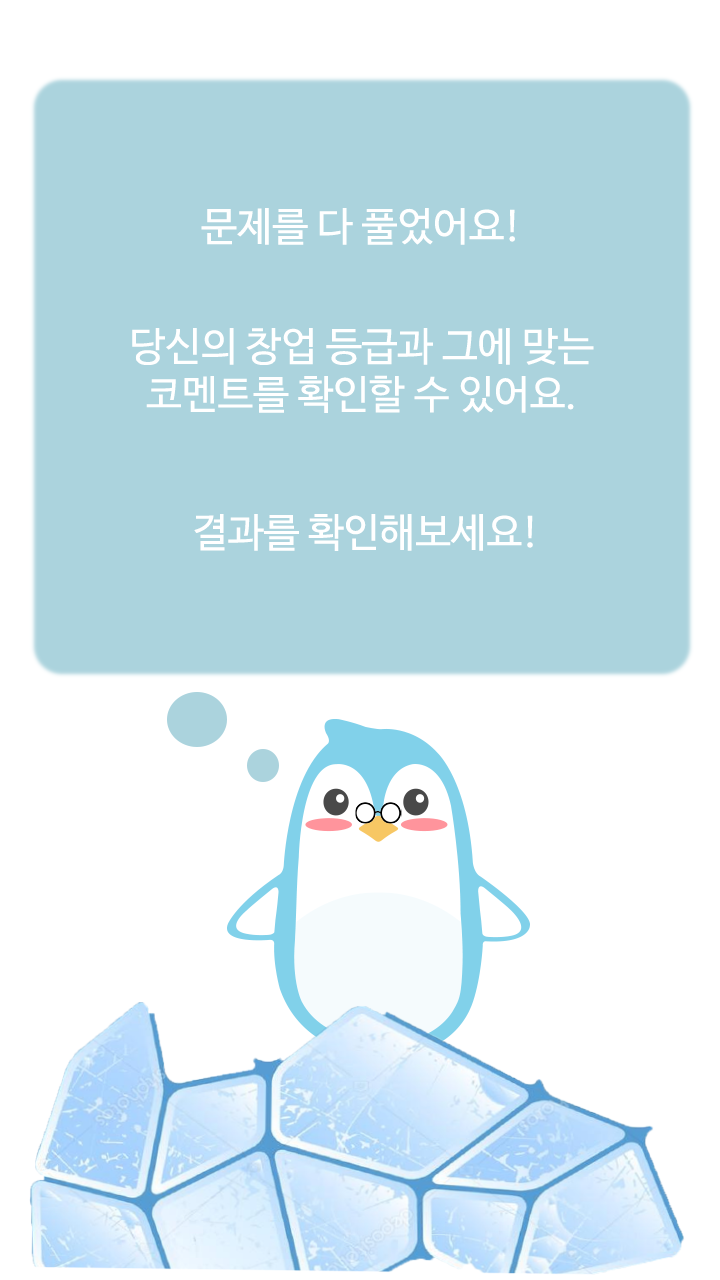
<style>
.page{position:relative;width:720px;height:1280px;background:#ffffff}
.page>*{position:absolute;margin:0}
.t1{font:40px/48px "NanumBarunGothic";color:#ffffff}
.t2{font:28px/30px "MalgunGothic";color:#000000}
.t3{font:40px/30px "NanumBarunGothic";color:#ffffff}
</style>
<div class="page">
<p class="t1" style="left:132px;top:208px;width:462px;height:343px;text-align:center"><span class="t2"><br><br><br><br><br></span><span class="t3">문제를 다 풀었어요!<br><br><br><br></span>당신의 창업 등급과 그에 맞는 <br>코멘트를 확인할 수 있어요.<br><span class="t3"><br><br><br> 결과를 확인해보세요!</span></p>
</div>
